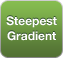
<style>
.page{position:relative;width:63px;height:58px}
.page>*{position:absolute;margin:0}
.t1{font:12px "HelveticaNeueBold";color:#ffffff}
</style>
<div class="page">
<p class="t1" style="left:6px;top:16px;width:51px;height:25px;text-align:center">Steepest<br>Gradient</p>
</div>
